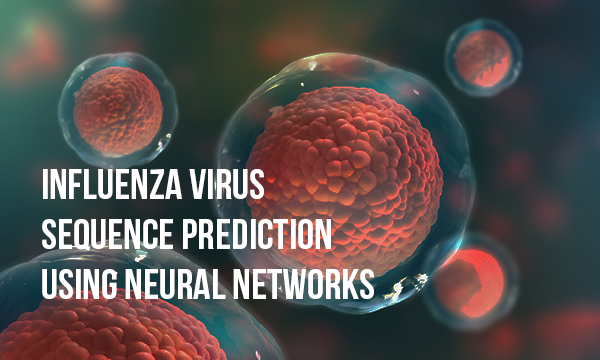
<style>
.page{position:relative;width:600px;height:360px}
.page>*{position:absolute;margin:0}
.t1{font:41.7px "BebasNeueBold";color:#ffffff;scale:1.04 1}
</style>
<div class="page">
<p class="t1" style="left:42px;top:169px;width:332px;height:130px">Influenza Virus<br>Sequence Prediction<br>using Neural Networks</p>
</div>
